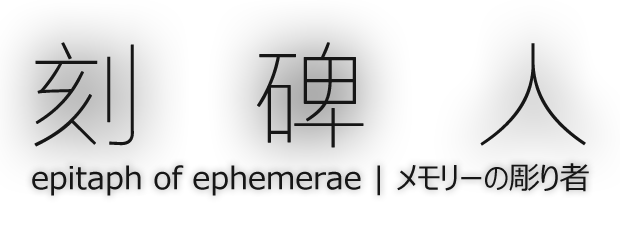
<style>
.page{position:relative;width:620px;height:230px;background:#ffffff}
.page>*{position:absolute;margin:0}
.t1{font:115px "FZLTCXHJW--GB1-0";letter-spacing:0.1em;color:#161616;font-weight:bold}
.t2{font:31px "MeiryoUI";color:#161616}
</style>
<div class="page">
<p class="t1" style="left:34px;top:42px;width:552px;height:106px">刻  碑  人</p>
<p class="t2" style="left:32px;top:163px;width:557px;height:33px">epitaph of ephemerae | メモリーの彫り者</p>
</div>
